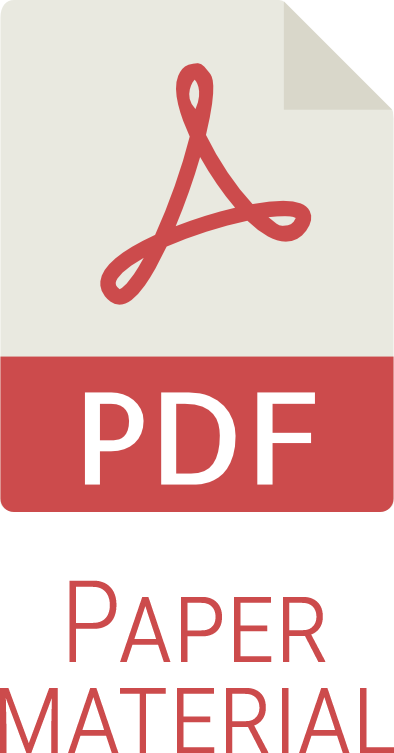
<style>
.page{position:relative;width:394px;height:753px;background:#e9e9e0}
.page>*{position:absolute;margin:0}
.t1{font:114.3px/91.4px "RobotoCondensed-Light";color:#cc4b4c;font-variant:small-caps}
</style>
<div class="page">
<p class="t1" style="left:0px;top:580px;width:395px;height:173px;text-align:center">Paper<br>material</p>
</div>
